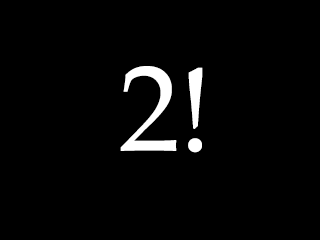
<style>
.page{position:relative;width:320px;height:240px;background:#000000}
.page>*{position:absolute;margin:0}
.t1{font:120px "BookAntiqua";color:#ffffff}
</style>
<div class="page">
<p class="t1" style="left:120px;top:66px;width:83px;height:87px">2!</p>
</div>
